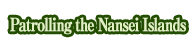
<style>
.page{position:relative;width:196px;height:48px;background:#ffffff}
.page>*{position:absolute;margin:0}
.t1{font:18px "RyuminPro-ExBold";letter-spacing:-0.08em;color:#e1f1c3;font-weight:bold;scale:0.79 1}
</style>
<div class="page">
<p class="t1" style="left:10px;top:17px;width:176px;height:18px">Patrolling the Nansei Islands</p>
</div>
